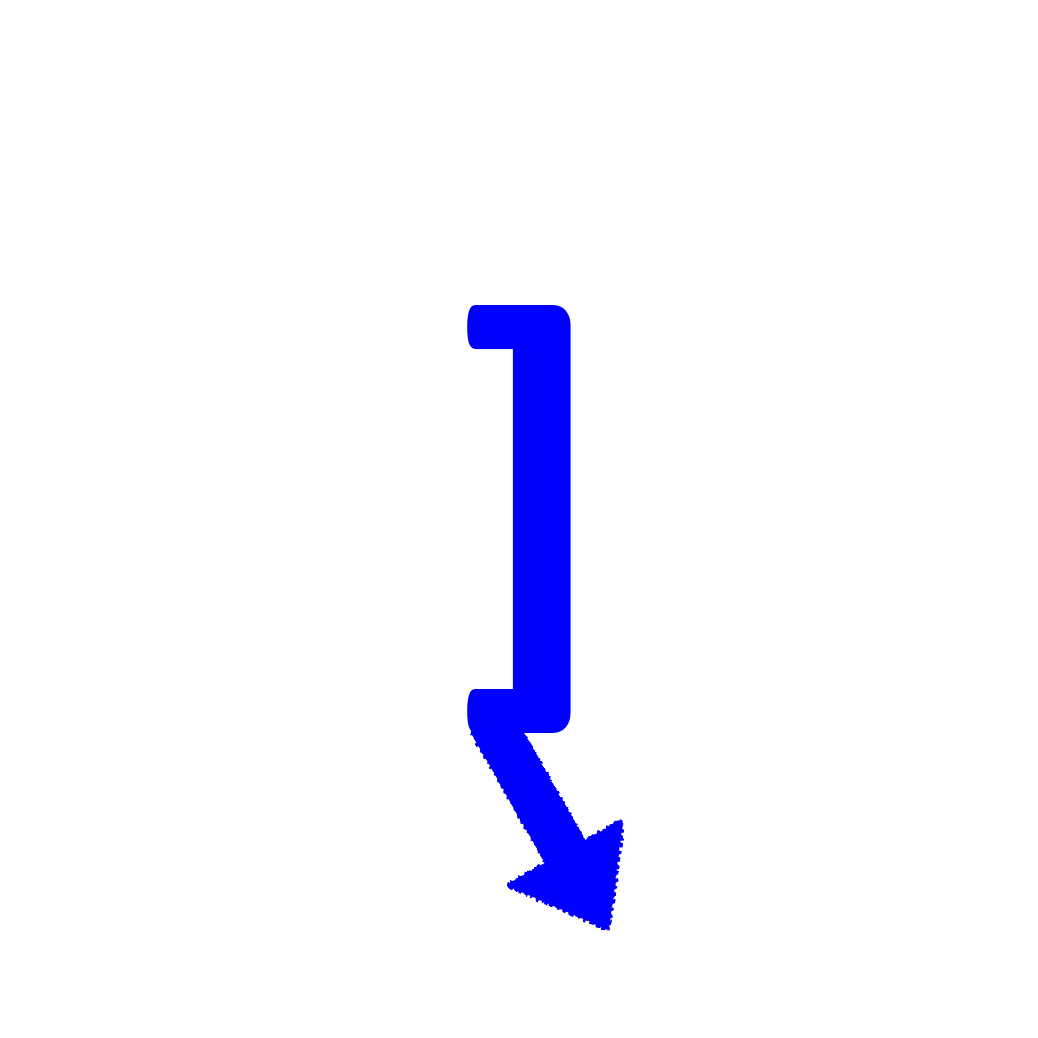
<style>
.page{position:relative;width:1038px;height:1038px;background:#ffffff}
.page>*{position:absolute;margin:0}
.t1{font:500px "Calibri-Bold";color:#0000ff}
</style>
<div class="page">
<p class="t1" style="left:467px;top:305px;width:104px;height:428px">]</p>
</div>
